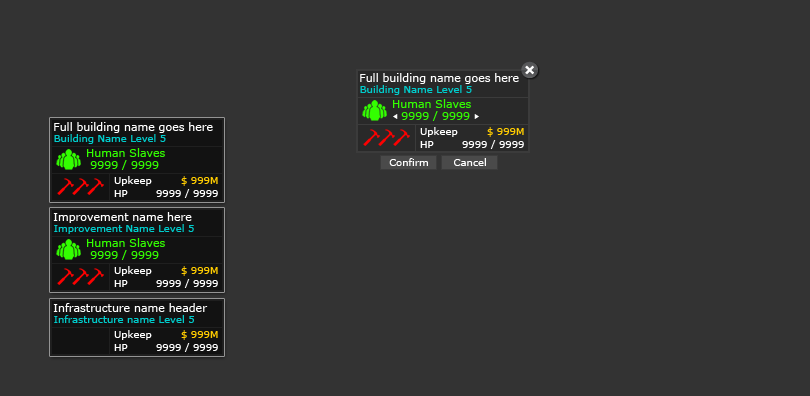
<style>
.page{position:relative;width:810px;height:396px;background:#333333}
.page>*{position:absolute;margin:0}
.t1{font:11px "Verdana";color:#ffffff}
.t2{font:10px "Verdana";color:#00cccc}
.t3{font:11px "Verdana";color:#33ff00}
.t4{font:10px "Verdana";color:#ffffff}
.t5{font:10px "Verdana";color:#ffcc00}
</style>
<div class="page">
<p class="t1" style="left:360px;top:73px;width:159px;height:11px">Full building name goes here</p>
<p class="t2" style="left:360px;top:85px;width:112px;height:10px">Building Name Level 5</p>
<p class="t3" style="left:393px;top:99px;width:78px;height:9px">Human Slaves</p>
<p class="t3" style="left:401px;top:111px;width:69px;height:10px">9999 / 9999</p>
<p class="t1" style="left:54px;top:122px;width:159px;height:11px">Full building name goes here</p>
<p class="t2" style="left:54px;top:134px;width:112px;height:10px">Building Name Level 5</p>
<p class="t4" style="left:420px;top:127px;width:38px;height:10px">Upkeep</p>
<p class="t5" style="left:487px;top:127px;width:37px;height:10px">$ 999M</p>
<p class="t3" style="left:87px;top:148px;width:78px;height:9px">Human Slaves</p>
<p class="t4" style="left:420px;top:141px;width:14px;height:7px">HP</p>
<p class="t4" style="left:462px;top:140px;width:62px;height:9px">9999 / 9999</p>
<p class="t3" style="left:90px;top:160px;width:69px;height:10px">9999 / 9999</p>
<p class="t4" style="left:389px;top:158px;width:39px;height:8px">Confirm</p>
<p class="t4" style="left:454px;top:158px;width:32px;height:8px">Cancel</p>
<p class="t4" style="left:114px;top:176px;width:38px;height:10px">Upkeep</p>
<p class="t5" style="left:181px;top:176px;width:37px;height:10px">$ 999M</p>
<p class="t4" style="left:114px;top:190px;width:14px;height:7px">HP</p>
<p class="t4" style="left:156px;top:189px;width:62px;height:9px">9999 / 9999</p>
<p class="t1" style="left:53px;top:212px;width:139px;height:11px">Improvement name here</p>
<p class="t2" style="left:54px;top:224px;width:140px;height:10px">Improvement Name Level 5</p>
<p class="t3" style="left:87px;top:238px;width:78px;height:9px">Human Slaves</p>
<p class="t3" style="left:90px;top:250px;width:69px;height:10px">9999 / 9999</p>
<p class="t4" style="left:114px;top:266px;width:38px;height:10px">Upkeep</p>
<p class="t5" style="left:181px;top:266px;width:37px;height:10px">$ 999M</p>
<p class="t4" style="left:114px;top:280px;width:14px;height:7px">HP</p>
<p class="t4" style="left:156px;top:279px;width:62px;height:9px">9999 / 9999</p>
<p class="t1" style="left:53px;top:303px;width:155px;height:9px">Infrastructure name header</p>
<p class="t2" style="left:54px;top:315px;width:140px;height:8px">Infrastructure name Level 5</p>
<p class="t4" style="left:114px;top:330px;width:38px;height:10px">Upkeep</p>
<p class="t5" style="left:181px;top:330px;width:37px;height:10px">$ 999M</p>
<p class="t4" style="left:114px;top:344px;width:14px;height:7px">HP</p>
<p class="t4" style="left:156px;top:343px;width:62px;height:9px">9999 / 9999</p>
</div>
